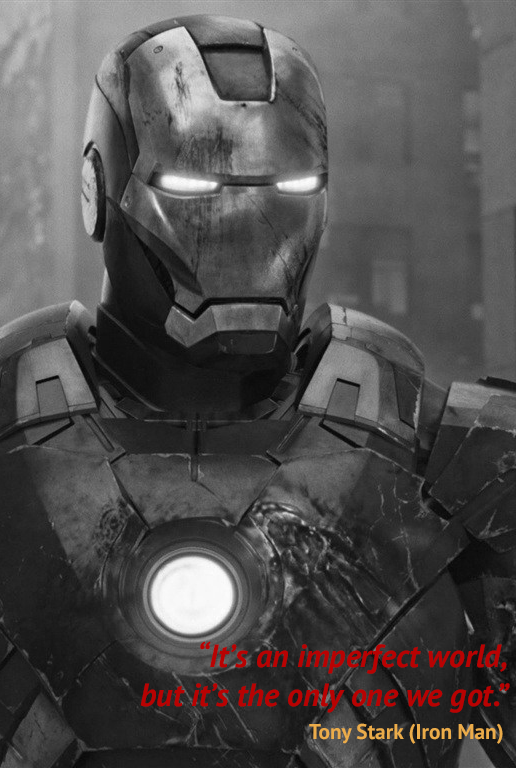
<style>
.page{position:relative;width:516px;height:768px}
.page>*{position:absolute;margin:0}
.t1{font:32px "PTSans-BoldItalic";color:#b90202}
.t2{font:21.3px "PTSans-Bold";color:#ebac4a}
</style>
<div class="page">
<p class="t1" style="left:140px;top:641px;width:370px;height:72px;text-align:right">“It’s an imperfect world, <br>but it’s the only one we got.”</p>
<p class="t2" style="left:309px;top:723px;width:194px;height:21px">Tony Stark (Iron Man)</p>
</div>
